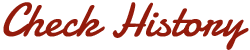
<style>
.page{position:relative;width:250px;height:50px;background:#ffffff}
.page>*{position:absolute;margin:0}
.t1{font:48px "Damion";color:#931b0c}
</style>
<div class="page">
<p class="t1" style="left:3px;top:2px;width:246px;height:48px">Check History</p>
</div>
